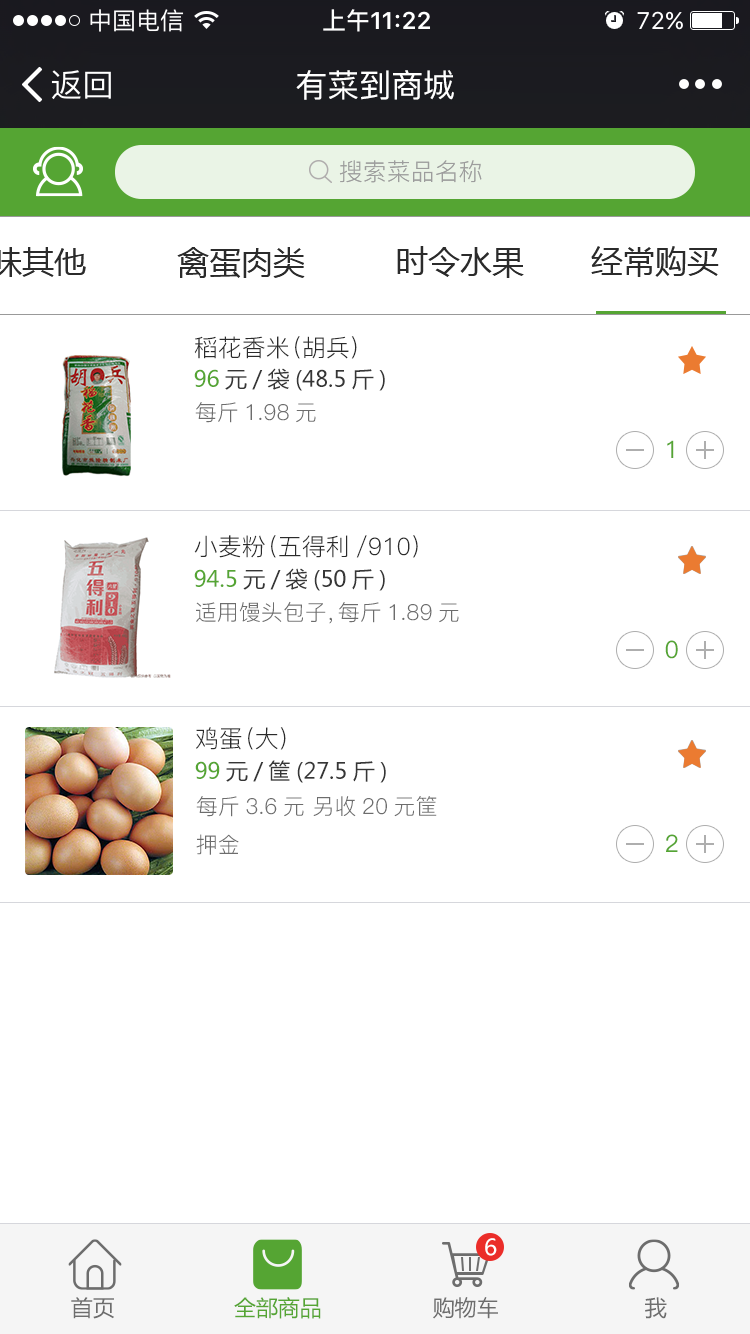
<style>
.page{position:relative;width:750px;height:1334px;background:#ffffff}
.page>*{position:absolute;margin:0}
.t1{font:32px "PingFang-SC-Medium";color:#ffffff}
.t2{font:24px "PingFang-SC-Regular";color:#9d9d9d}
.t3{font:32px "MicrosoftYaHei";color:#2b2b2b}
.t4{font:24px "PingFang-SC-Regular";color:#2b2b2b}
.t5{font:22px "MicrosoftYaHei";color:#363636}
.t6{font:22px "MicrosoftYaHei";color:#55a533}
.t7{font:22px "PingFang-SC-Regular";color:#6d6d6d}
.t8{font:24px "PingFang-SC-Medium";color:#55a533}
.t9{font:22px "MicrosoftYaHei";color:#fffefe}
.t10{font:22px "MicrosoftYaHei";color:#6d6d6d}
</style>
<div class="page">
<p class="t1" style="left:296px;top:70px;width:158px;height:30px">有菜到商城</p>
<p class="t2" style="left:339px;top:160px;width:143px;height:23px">搜索菜品名称</p>
<p class="t3" style="left:397px;top:246px;width:127px;height:32px">时令水果</p>
<p class="t3" style="left:591px;top:246px;width:128px;height:31px">经常购买</p>
<p class="t3" style="left:177px;top:247px;width:128px;height:31px">禽蛋肉类</p>
<p class="t4" style="left:194px;top:336px;width:163px;height:23px">稻花香米（胡兵）</p>
<p class="t5" style="left:194px;top:368px;width:191px;height:23px"><span class="t6">96</span>元/袋(48.5斤)</p>
<p class="t7" style="left:195px;top:402px;width:121px;height:21px">每斤1.98元</p>
<p class="t8" style="left:667px;top:440px;width:7px;height:18px">1</p>
<p class="t4" style="left:194px;top:535px;width:224px;height:23px">小麦粉（五得利/910）</p>
<p class="t5" style="left:194px;top:568px;width:191px;height:23px"><span class="t6">94.5</span>元/袋(50斤)</p>
<p class="t7" style="left:196px;top:601px;width:263px;height:23px">适用馒头包子，每斤1.89元</p>
<p class="t8" style="left:665px;top:640px;width:13px;height:19px">0</p>
<p class="t4" style="left:196px;top:727px;width:90px;height:23px">鸡蛋（大）</p>
<p class="t5" style="left:195px;top:760px;width:191px;height:23px"><span class="t6">99</span>元/筐(27.5斤)</p>
<p class="t7" style="left:196px;top:796px;width:241px;height:59px">每斤3.6元 另收20元筐<br>押金</p>
<p class="t8" style="left:666px;top:834px;width:12px;height:18px">2</p>
<p class="t9" style="left:485px;top:1238px;width:12px;height:18px">6</p>
<p class="t10" style="left:71px;top:1297px;width:43px;height:22px">首页</p>
<p class="t6" style="left:234px;top:1297px;width:87px;height:22px">全部商品</p>
<p class="t10" style="left:433px;top:1297px;width:65px;height:22px">购物车</p>
<p class="t10" style="left:645px;top:1297px;width:22px;height:22px">我</p>
</div>
